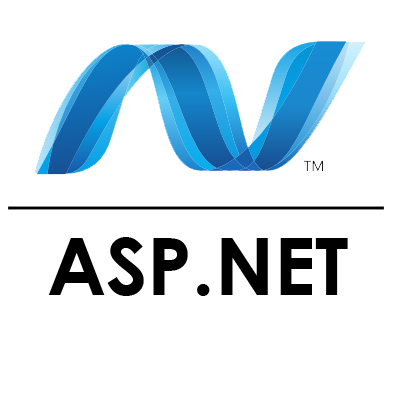
<style>
.page{position:relative;width:400px;height:400px;background:#ffffff}
.page>*{position:absolute;margin:0}
.t1{font:80px "CenturyGothic-Bold";color:#000000}
</style>
<div class="page">
<p class="t1" style="left:48px;top:237px;width:300px;height:59px">ASP.NET</p>
</div>
